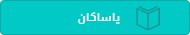
<style>
.page{position:relative;width:190px;height:35px;background:#00c9c6}
.page>*{position:absolute;margin:0}
.t1{font:11px "DroidArabicKufi-Bold";color:#f1f2f2}
</style>
<div class="page">
<p class="t1" style="left:78px;top:12px;width:42px;height:12px">یاساکان</p>
</div>
